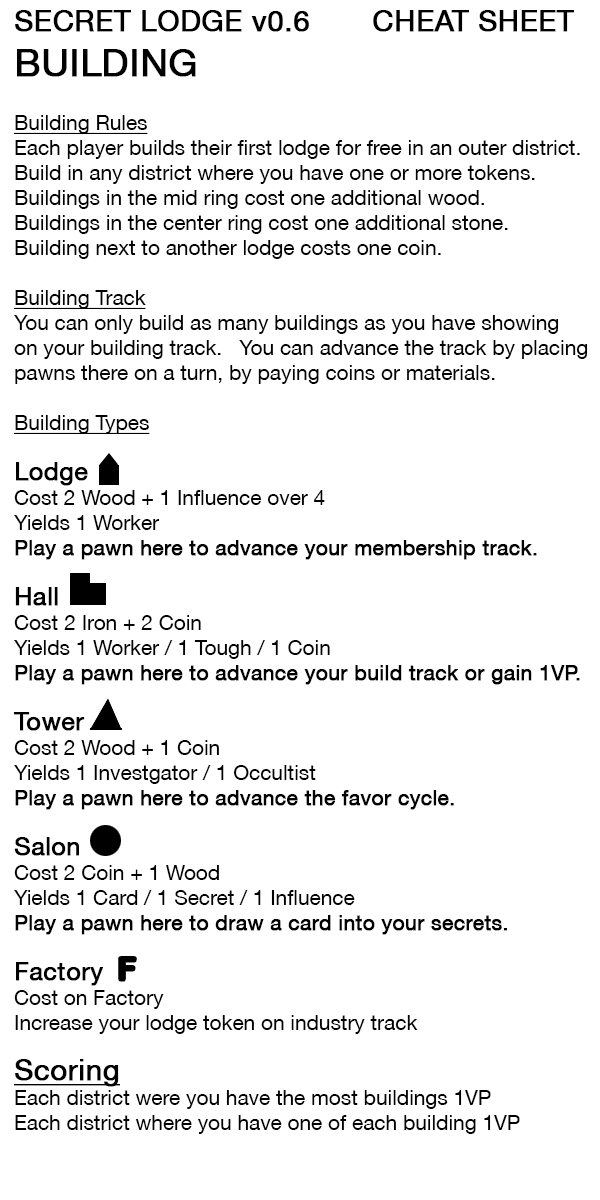
<style>
.page{position:relative;width:600px;height:1200px;background:#ffffff}
.page>*{position:absolute;margin:0}
.t1{font:29.2px "HelveticaNeueLT-Roman";color:#000000;font-weight:bold}
.t2{font:20.8px/25px "HelveticaNeueLT-Roman";color:#000000}
.t3{font:37.5px/29.2px "HelveticaNeueLT-Roman";color:#000000;font-weight:bold}
.t4{font:20.8px/25px "HelveticaNeueLT-Roman";color:#000000;text-decoration:underline}
.t5{font:25px/25px "HelveticaNeueLT-Roman";color:#000000;font-weight:bold}
.t6{font:20.8px/25px "HelveticaNeueLT-Roman";color:#000000;font-weight:bold}
.t7{font:29.2px/25px "HelveticaNeueLT-Roman";color:#000000;font-weight:bold;text-decoration:underline}
</style>
<div class="page">
<p class="t1" style="left:15px;top:10px;width:559px;height:22px">SECRET LODGE v0.6       CHEAT SHEET</p>
<p class="t2" style="left:14px;top:49px;width:574px;height:1085px"><span class="t3">BUILDING<br><br></span><span class="t4">Building Rules<br></span>Each player builds their first lodge for free in an outer district.<br>Build in any district where you have one or more tokens.<br>Buildings in the mid ring cost one additional wood.<br>Buildings in the center ring cost one additional stone.<br>Building next to another lodge costs one coin.<br><br><span class="t4">Building Track<br></span>You can only build as many buildings as you have showing<br>on your building track.   You can advance the track by placing<br>pawns there on a turn, by paying coins or materials.  <br><span class="t4"><br>Building Types<br><br></span><span class="t5">Lodge </span> <br>Cost 2 Wood + 1 Influence over 4 <br>Yields 1 Worker<br><span class="t6">Play a pawn here to advance your membership track.<br><br></span><span class="t5">Hall <br></span>Cost 2 Iron + 2 Coin <br>Yields 1 Worker / 1 Tough / 1 Coin<br><span class="t6">Play a pawn here to advance your build track or gain 1VP.<br></span><span class="t5"><br>Tower <br></span>Cost 2 Wood + 1 Coin <br>Yields 1 Investgator / 1 Occultist<br><span class="t6">Play a pawn here to advance the favor cycle.<br></span><span class="t5"><br>Salon</span> <br>Cost 2 Coin + 1 Wood <br>Yields 1 Card / 1 Secret / 1 Influence<br><span class="t6">Play a pawn here to draw a card into your secrets.<br></span><span class="t5"><br>Factory</span> <br>Cost on Factory <br>Increase your lodge token on industry track<br><br><span class="t7">Scoring<br></span>Each district were you have the most buildings 1VP<br>Each district where you have one of each building 1VP</p>
<p class="t1" style="left:120px;top:958px;width:15px;height:22px">F</p>
</div>
